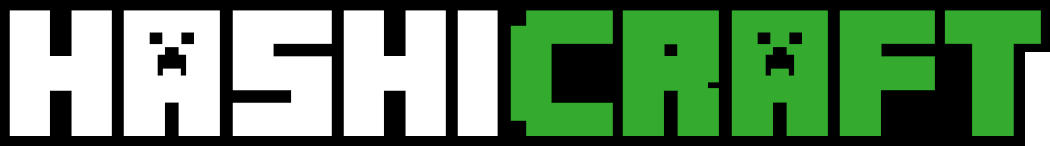
<style>
.page{position:relative;width:1050px;height:146px;background:#000000}
.page>*{position:absolute;margin:0}
.t1{font:160px "Minecrafter";color:#ffffff}
.t2{font:160px "Minecrafter";color:#34aa2f}
</style>
<div class="page">
<p class="t1" style="left:9px;top:10px;width:1032px;height:126px">Hashi<span class="t2">Craft</span></p>
</div>
